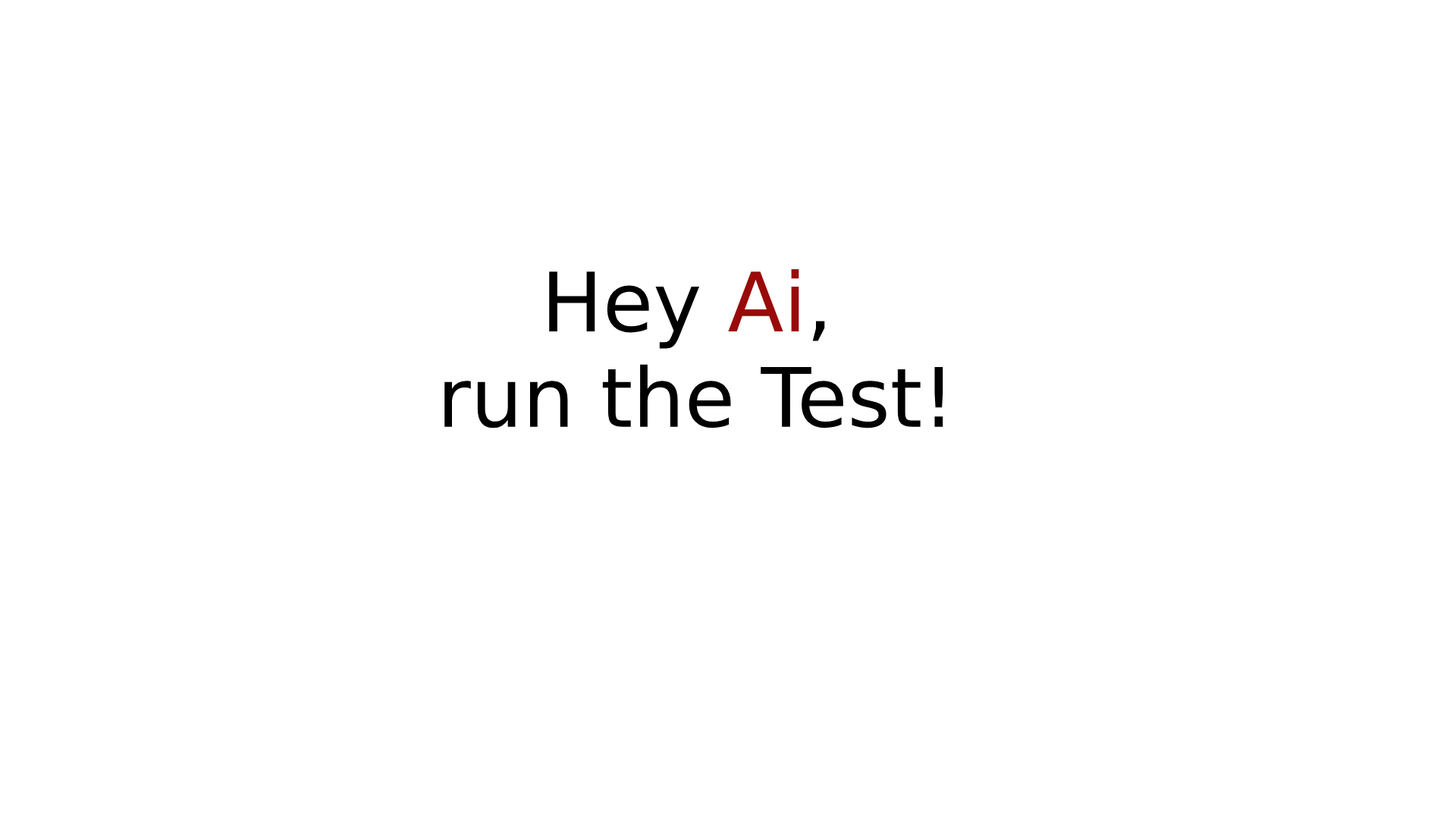
<style>
.page{position:relative;width:1456px;height:819px;background:#ffffff}
.page>*{position:absolute;margin:0}
.t1{font:81.9px "DejaVuSans";color:#000000}
.t2{font:81.9px "DejaVuSans";color:#990a0a}
</style>
<div class="page">
<p class="t1" style="left:444px;top:268px;width:499px;height:160px">Hey <span class="t2">Ai</span>,<br> run the Test!</p>
</div>
